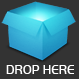
<style>
.page{position:relative;width:79px;height:79px;background:#333333}
.page>*{position:absolute;margin:0}
.t1{font:13px "HandelGotD-Ligh";letter-spacing:0.02em;color:#ffffff;scale:0.93 1}
</style>
<div class="page">
<p class="t1" style="left:6px;top:65px;width:68px;height:9px">DROP HERE</p>
</div>
